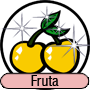
<style>
.page{position:relative;width:90px;height:90px;background:#ffffff}
.page>*{position:absolute;margin:0}
.t1{font:14.7px "Swiss721BT-RomanCondensed";color:#000000}
</style>
<div class="page">
<p class="t1" style="left:31px;top:75px;width:28px;height:11px">Fruta</p>
</div>
